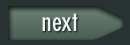
<style>
.page{position:relative;width:130px;height:45px;background:#293233}
.page>*{position:absolute;margin:0}
.t1{font:27px "Futura-CondensedMedium";color:#ebf1f0}
</style>
<div class="page">
<p class="t1" style="left:42px;top:13px;width:36px;height:19px">next</p>
</div>
